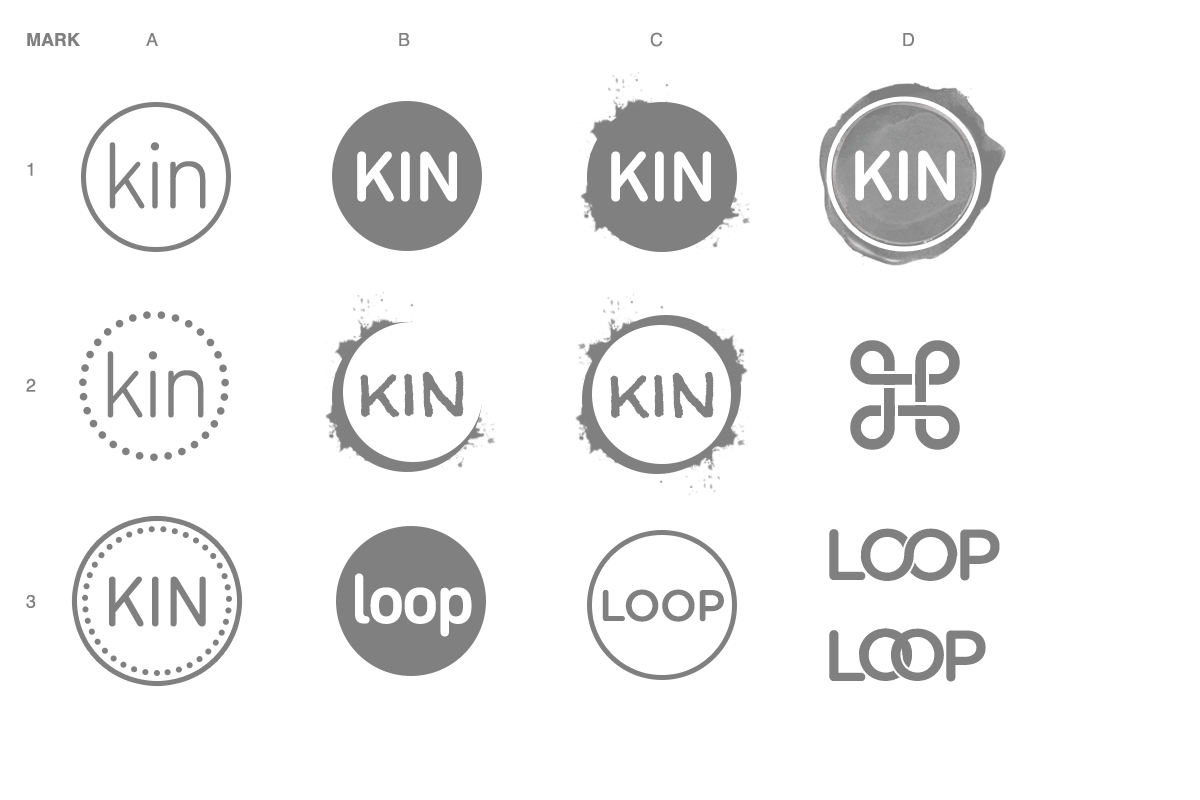
<style>
.page{position:relative;width:1200px;height:800px;background:#ffffff}
.page>*{position:absolute;margin:0}
.t1{font:96px "DINNextRoundedLTPro-Light";letter-spacing:-0.05em;color:#808080}
.t2{font:72px "DINNextRoundedLTPro-Medium";color:#ffffff}
.t3{font:144px "LucidaGrande";color:#808080}
.t4{font:84px "WalterTurncoat";color:#808080}
.t5{font:72px "GothamRounded-Medium";letter-spacing:-0.05em;color:#808080}
.t6{font:72px "DINNextRoundedLTPro-Regular";color:#808080}
.t7{font:72px "DINNextRoundedLTPro-Medium";letter-spacing:-0.05em;color:#ffffff}
.t8{font:44px "GothamRounded-Medium";letter-spacing:-0.025em;color:#808080}
.t9{font:72px "GothamRounded-Medium";letter-spacing:-0.05em;color:#ffffff}
</style>
<div class="page">
<p class="t1" style="left:109px;top:142px;width:97px;height:67px">kin</p>
<p class="t2" style="left:855px;top:150px;width:100px;height:51px">KIN</p>
<p class="t2" style="left:357px;top:151px;width:100px;height:51px">KIN</p>
<p class="t2" style="left:611px;top:151px;width:100px;height:51px">KIN</p>
<p class="t3" style="left:850px;top:340px;width:110px;height:110px;rotate:180deg">⌘</p>
<p class="t1" style="left:107px;top:351px;width:97px;height:67px">kin</p>
<p class="t4" style="left:360px;top:371px;width:104px;height:47px">kin</p>
<p class="t4" style="left:610px;top:372px;width:104px;height:47px">kin</p>
<p class="t5" style="left:829px;top:528px;width:171px;height:53px">LOOP</p>
<p class="t5" style="left:904px;top:528px;width:54px;height:53px">O</p>
<p class="t6" style="left:109px;top:576px;width:97px;height:51px">KIN</p>
<p class="t7" style="left:355px;top:573px;width:117px;height:64px">loop</p>
<p class="t8" style="left:602px;top:589px;width:122px;height:33px">LOOP</p>
<p class="t5" style="left:829px;top:630px;width:37px;height:51px">L</p>
<p class="t5" style="left:859px;top:628px;width:132px;height:53px">OO<span class="t9">P</span></p>
<p class="t5" style="left:859px;top:628px;width:53px;height:53px">O</p>
<p class="t5" style="left:891px;top:628px;width:53px;height:53px">O</p>
<p class="t5" style="left:946px;top:630px;width:40px;height:52px">P</p>
</div>
